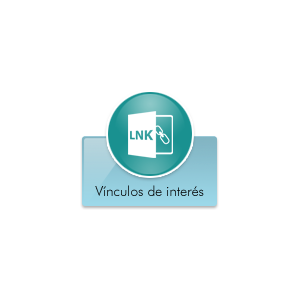
<style>
.page{position:relative;width:300px;height:300px;background:#ffffff}
.page>*{position:absolute;margin:0}
.t1{font:14px "FuturaBT-Light"}
</style>
<div class="page">
<p class="t1" style="left:95px;top:185px;width:109px;height:11px">Vínculos de interés</p>
</div>
